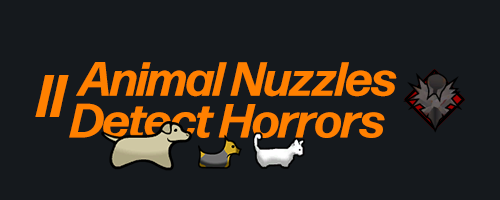
<style>
.page{position:relative;width:500px;height:200px;background:#15191d}
.page>*{position:absolute;margin:0}
.t1{font:48px "FormaDJRDisplay-BoldItalic";color:#ff8000}
.t2{font:60px "FormaDJRDisplay-BoldItalic";color:#ff8000}
</style>
<div class="page">
<p class="t1" style="left:76px;top:62px;width:321px;height:35px">Animal Nuzzles</p>
<p class="t2" style="left:35px;top:75px;width:34px;height:42px">II</p>
<p class="t1" style="left:69px;top:103px;width:316px;height:35px">Detect Horrors</p>
</div>
